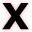
<style>
.page{position:relative;width:32px;height:32px;background:#000000}
.page>*{position:absolute;margin:0}
.t1{font:36px "Verdana-Bold";color:#000000}
</style>
<div class="page">
<p class="t1" style="left:2px;top:3px;width:27px;height:27px">X</p>
</div>
